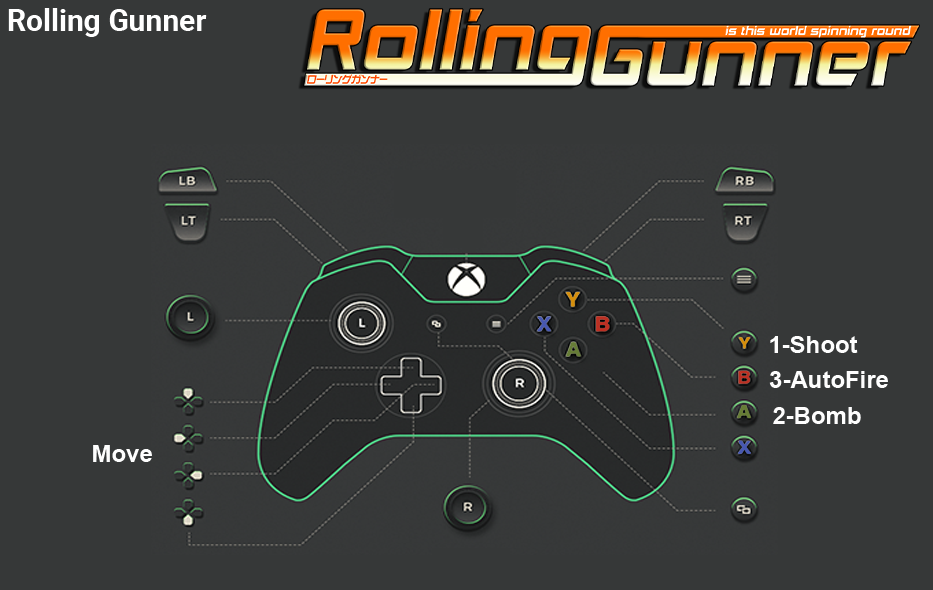
<style>
.page{position:relative;width:933px;height:590px;background:#363838}
.page>*{position:absolute;margin:0}
.t1{font:30px "Roboto-Bold";color:#ffffff}
.t2{font:24px "Arial-BoldMT";color:#fefefe}
</style>
<div class="page">
<p class="t1" style="left:8px;top:8px;width:199px;height:29px">Rolling Gunner</p>
<p class="t2" style="left:770px;top:336px;width:88px;height:17px">1-Shoot</p>
<p class="t2" style="left:769px;top:371px;width:119px;height:17px">3-AutoFire</p>
<p class="t2" style="left:773px;top:407px;width:88px;height:17px">2-Bomb</p>
<p class="t2" style="left:93px;top:445px;width:59px;height:17px">Move</p>
</div>
